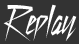
<style>
.page{position:relative;width:79px;height:44px;background:#333333}
.page>*{position:absolute;margin:0}
.t1{font:37.9px "StillTime-Regular";color:#ffffff}
</style>
<div class="page">
<p class="t1" style="left:3px;top:4px;width:74px;height:37px">Replay</p>
</div>
